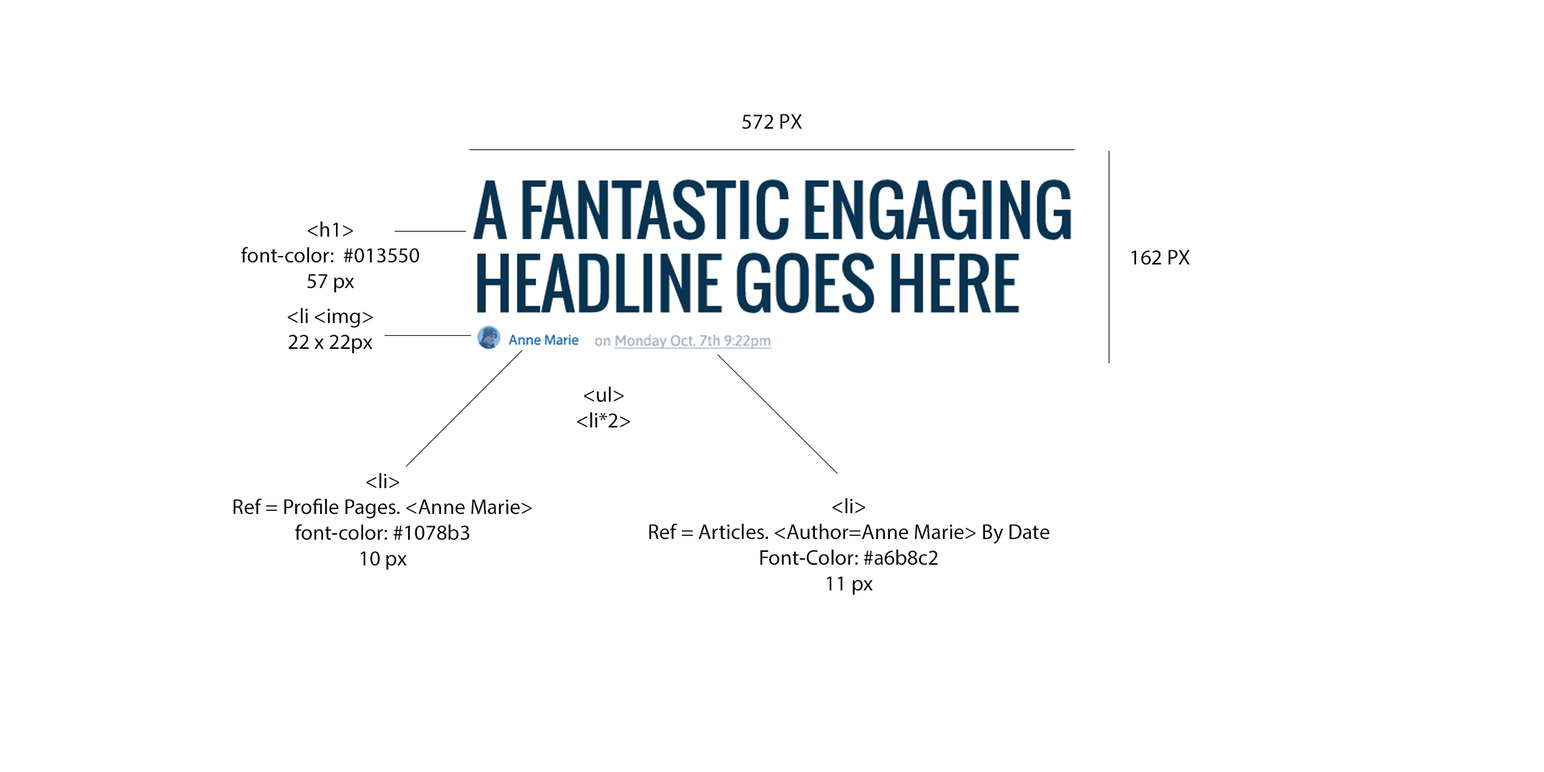
<style>
.page{position:relative;width:1544px;height:772px;background:#ffffff}
.page>*{position:absolute;margin:0}
.t1{font:21.4px "MyriadPro-Regular";color:#000000}
</style>
<div class="page">
<p class="t1" style="left:742px;top:114px;width:60px;height:15px">572 PX</p>
<p class="t1" style="left:241px;top:221px;width:179px;height:71px;text-align:center">&lt;h1&gt;<br>font-color:  #013550<br>57 px</p>
<p class="t1" style="left:1132px;top:250px;width:58px;height:15px">162 PX</p>
<p class="t1" style="left:287px;top:307px;width:86px;height:46px;text-align:center">&lt;li &lt;img&gt;<br>22 x 22px</p>
<p class="t1" style="left:577px;top:386px;width:54px;height:42px;text-align:center">&lt;ul&gt;<br>&lt;li*2&gt;</p>
<p class="t1" style="left:233px;top:473px;width:299px;height:97px;text-align:center">&lt;li&gt;<br>Ref = Profile Pages. &lt;Anne Marie&gt;<br>font-color: #1078b3<br>10 px</p>
<p class="t1" style="left:649px;top:498px;width:401px;height:97px;text-align:center">&lt;li&gt;<br>Ref = Articles. &lt;Author=Anne Marie&gt; By Date<br>Font-Color: #a6b8c2<br>11 px</p>
</div>
